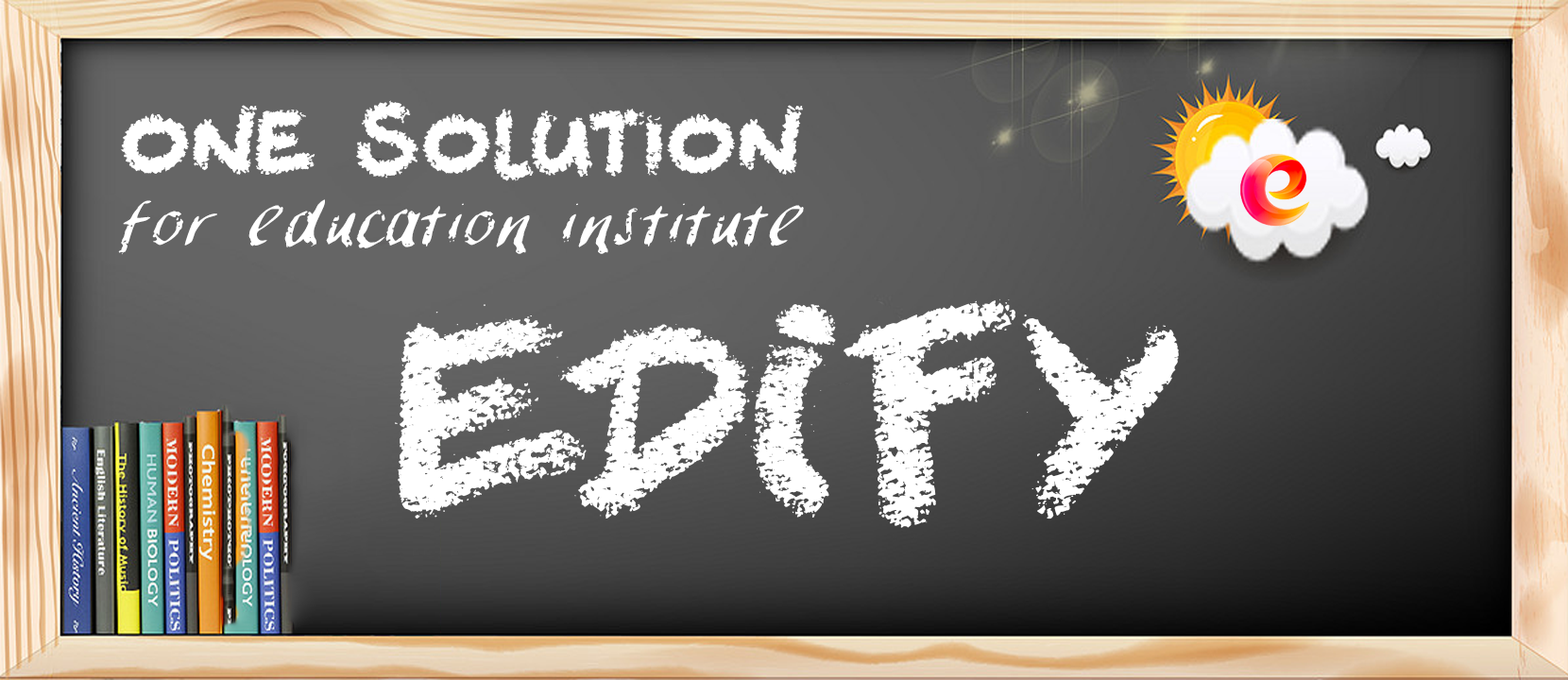
<style>
.page{position:relative;width:1568px;height:680px}
.page>*{position:absolute;margin:0}
.t1{font:89.1px "Chalkabout";color:#ffffff;scale:0.95 1}
.t2{font:74.2px "ChalkPaint";color:#ffffff}
.t3{font:230.3px "RightChalk";color:#ffffff}
</style>
<div class="page">
<p class="t1" style="left:121px;top:100px;width:682px;height:81px">ONE SOLUTION</p>
<p class="t2" style="left:118px;top:199px;width:686px;height:56px">for education institute</p>
<p class="t3" style="left:395px;top:298px;width:784px;height:230px">EDIFY</p>
</div>
